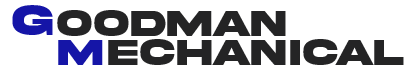
<style>
.page{position:relative;width:410px;height:76px;background:#ffffff}
.page>*{position:absolute;margin:0}
.t1{font:45px "AkiraExpanded-SuperBold";color:#1616a7}
.t2{font:38px "AkiraExpanded-SuperBold";color:#242425}
.t3{font:38px "AkiraExpanded-SuperBold";color:#1616a7}
</style>
<div class="page">
<p class="t1" style="left:12px;top:5px;width:41px;height:30px">G</p>
<p class="t2" style="left:57px;top:10px;width:229px;height:26px">oodman</p>
<p class="t2" style="left:58px;top:39px;width:346px;height:26px"><span class="t3">M</span>echanical</p>
</div>
